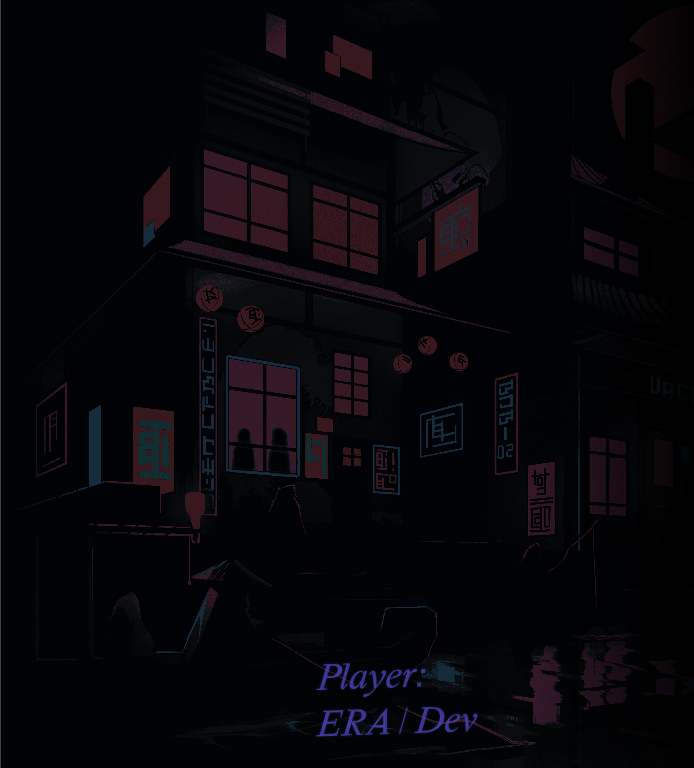
<style>
.page{position:relative;width:694px;height:768px;background:#010205}
.page>*{position:absolute;margin:0}
.t1{font:38.7px "HappyTimesattheIKOB-Italic";color:#3e3799}
</style>
<div class="page">
<p class="t1" style="left:316px;top:663px;width:162px;height:74px;rotate:-2deg">Player:<br>ERA | Dev</p>
</div>
